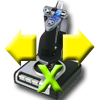
<style>
.page{position:relative;width:100px;height:100px;background:#ffffff}
.page>*{position:absolute;margin:0}
.t1{font:37.5px "Tahoma-Bold"}
</style>
<div class="page">
<p class="t1" style="left:37px;top:64px;width:27px;height:28px">X</p>
</div>
